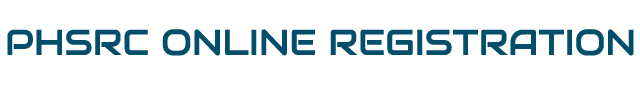
<style>
.page{position:relative;width:640px;height:100px;background:#ffffff}
.page>*{position:absolute;margin:0}
.t1{font:36px "Audiowide-Regular";color:#034f6b}
</style>
<div class="page">
<p class="t1" style="left:7px;top:29px;width:627px;height:27px">PHSRC ONLINE REGISTRATION</p>
</div>
